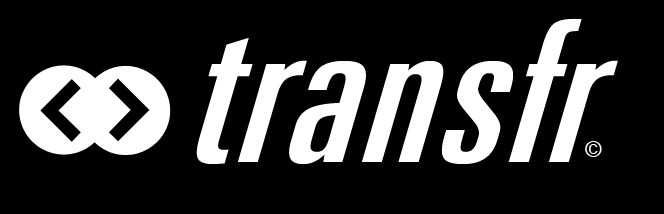
<style>
.page{position:relative;width:664px;height:214px;background:#000000}
.page>*{position:absolute;margin:0}
.t1{font:203px "ZurichBT-ExtraCondensed";color:#ffffff;scale:1.1 1}
.t2{font:21.9px "ArialMT";color:#ffffff}
</style>
<div class="page">
<p class="t1" style="left:196px;top:18px;width:422px;height:146px">transfr</p>
<p class="t2" style="left:585px;top:141px;width:17px;height:16px">©</p>
</div>
